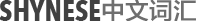
<style>
.page{position:relative;width:197px;height:21px;background:#ffffff}
.page>*{position:absolute;margin:0}
.t1{font:29px "AvenirNextCondensed-Bold";color:#414141}
.t2{font:24px "FZLTZHK--GBK1-0";color:#6e6e6e}
</style>
<div class="page">
<p class="t1" style="left:0px;top:0px;width:101px;height:21px">SHYNESE</p>
<p class="t2" style="left:102px;top:0px;width:94px;height:21px">中文词汇</p>
</div>
